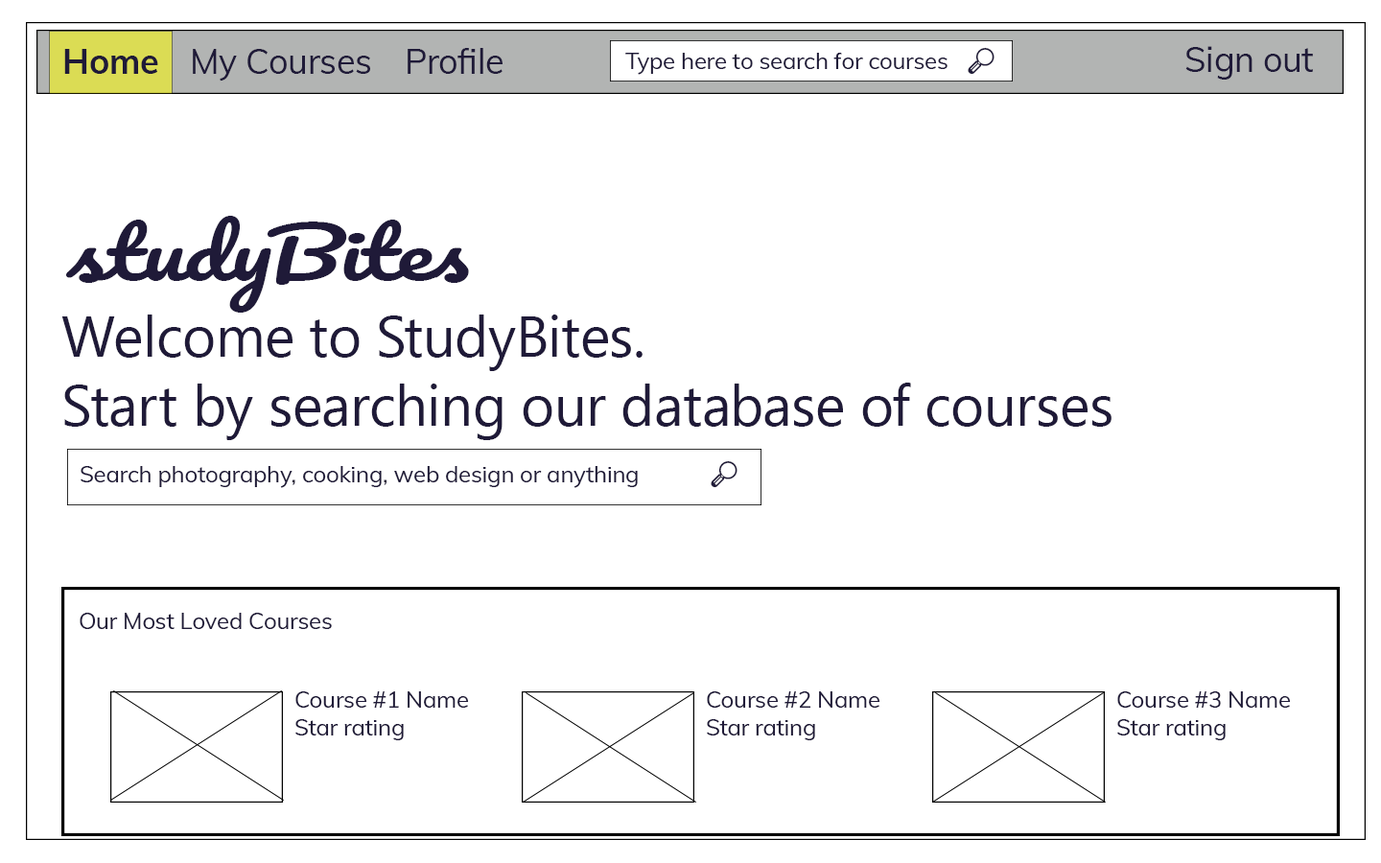
<style>
.page{position:relative;width:1381px;height:863px;background:#ffffff}
.page>*{position:absolute;margin:0}
.t1{font:34.5px "Muli-Bold";letter-spacing:-0.01em;color:#1f1a38}
.t2{font:34.5px "Muli-Regular";letter-spacing:-0.01em;color:#1f1a38}
.t3{font:23px "Muli-Regular";letter-spacing:-0.01em;color:#1f1a38}
.t4{font:23px "SegoeUIEmoji";letter-spacing:-0.01em;color:#1f1a38}
.t5{font:69.1px "Pacifico-Regular";letter-spacing:-0.01em;color:#1f1a38;scale:1.34 1}
</style>
<div class="page">
<p class="t1" style="left:64px;top:49px;width:94px;height:25px">Home</p>
<p class="t2" style="left:193px;top:49px;width:177px;height:33px">My Courses</p>
<p class="t2" style="left:408px;top:48px;width:95px;height:26px">Profile</p>
<p class="t3" style="left:625px;top:47px;width:370px;height:28px">Type here to search for courses   <span class="t4">🔎</span></p>
<p class="t2" style="left:1186px;top:46px;width:127px;height:34px">Sign out</p>
<p class="t5" style="left:65px;top:216px;width:206px;height:97px">study</p>
<p class="t5" style="left:267px;top:220px;width:202px;height:65px">Bites</p>
<p class="t3" style="left:81px;top:460px;width:657px;height:28px">Search photography, cooking, web design or anything            <span class="t4">🔎</span></p>
<p class="t3" style="left:80px;top:613px;width:252px;height:16px">Our Most Loved Courses</p>
<p class="t3" style="left:295px;top:692px;width:174px;height:49px">Course #1 Name<br>Star rating</p>
<p class="t3" style="left:707px;top:692px;width:174px;height:49px">Course #2 Name<br>Star rating</p>
<p class="t3" style="left:1117px;top:692px;width:174px;height:49px">Course #3 Name<br>Star rating</p>
</div>
